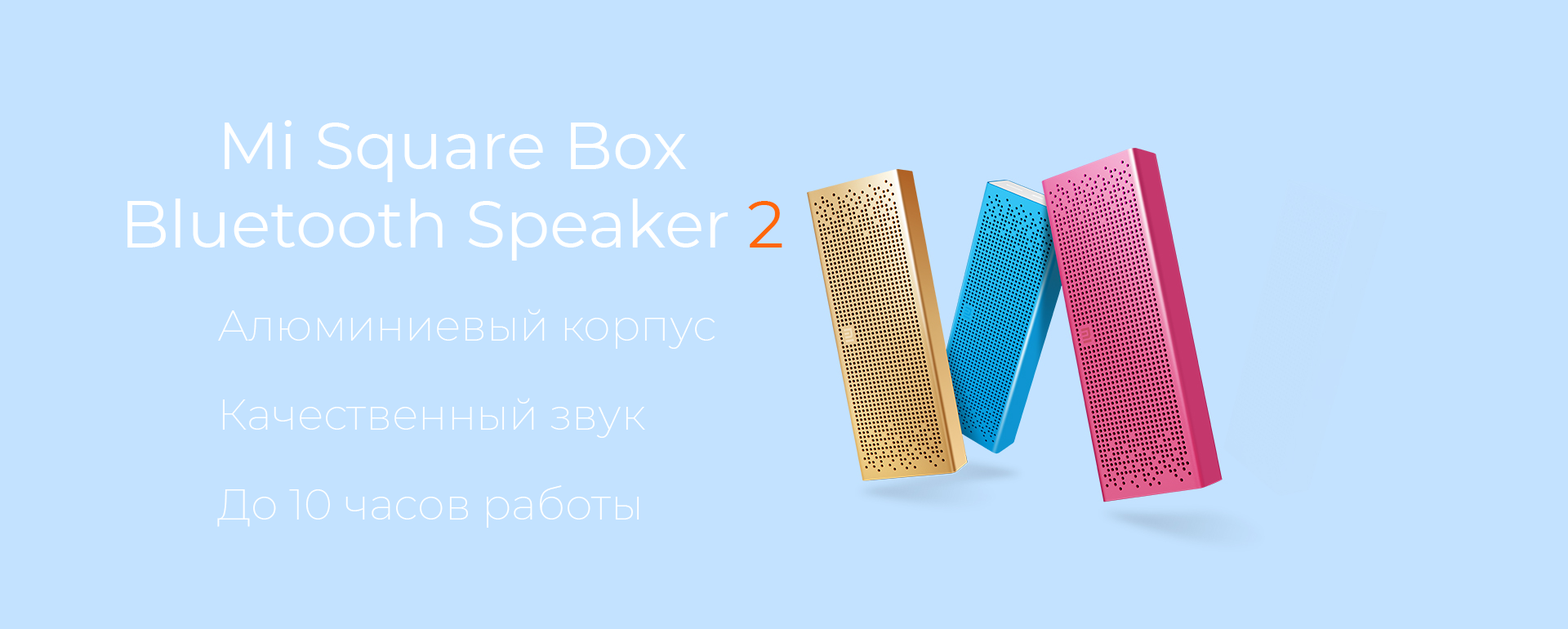
<style>
.page{position:relative;width:1568px;height:629px;background:#c3e2ff}
.page>*{position:absolute;margin:0}
.t1{font:65.3px "Montserrat-Regular";color:#ffffff}
.t2{font:65.3px "Montserrat-Regular";color:#ff6709}
.t3{font:43.6px "Montserrat-ExtraLight";color:#ffffff}
</style>
<div class="page">
<p class="t1" style="left:127px;top:120px;width:655px;height:141px;text-align:center">Mi Square Box Bluetooth Speaker <span class="t2">2</span></p>
<p class="t3" style="left:218px;top:309px;width:497px;height:40px">Алюминиевый корпус</p>
<p class="t3" style="left:222px;top:398px;width:423px;height:40px">Качественный звук</p>
<p class="t3" style="left:217px;top:485px;width:422px;height:43px">До 10 часов работы</p>
</div>
